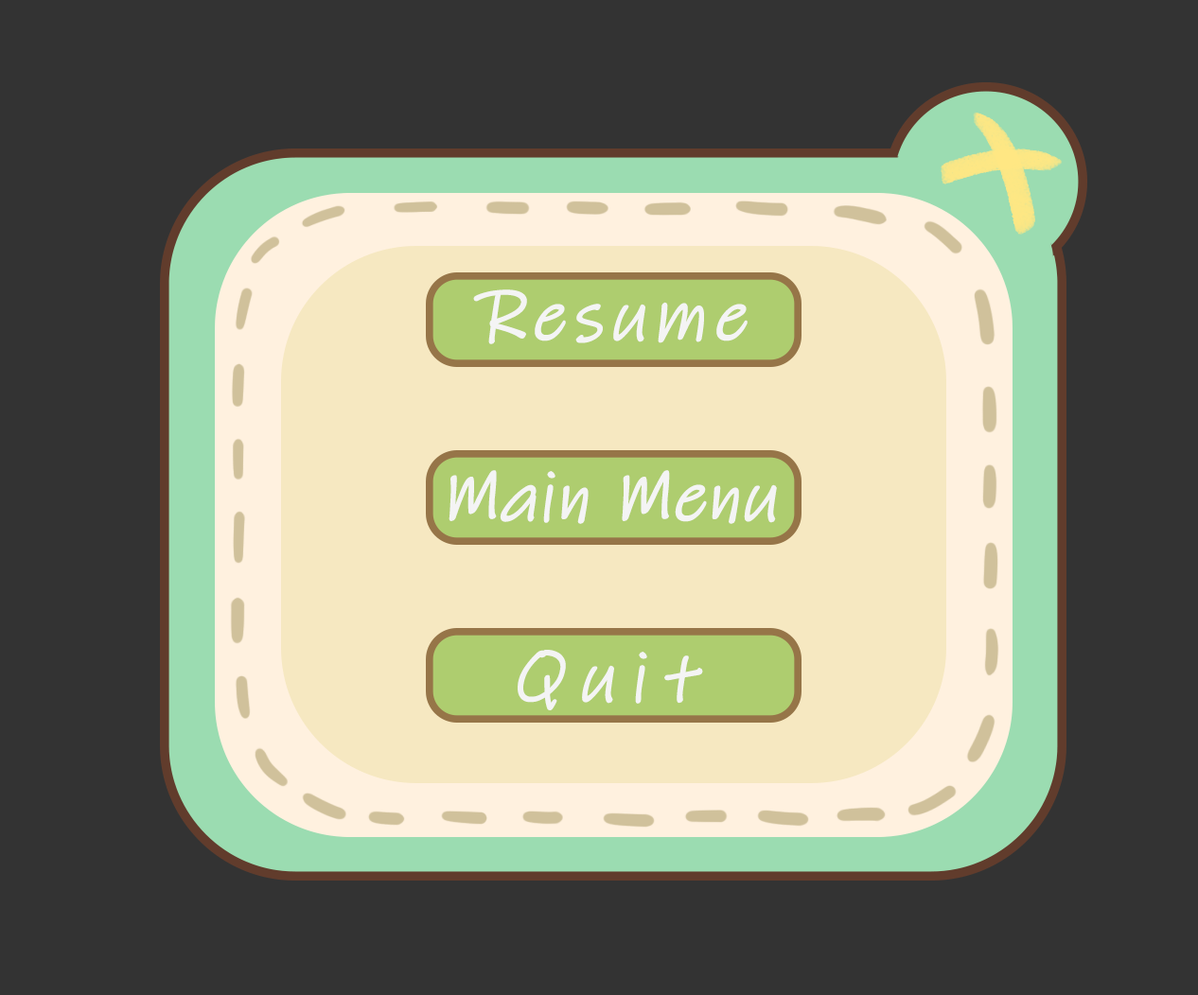
<style>
.page{position:relative;width:1198px;height:995px;background:#333333}
.page>*{position:absolute;margin:0}
.t1{font:70.6px "InkFree";letter-spacing:0.075em;color:#f4f4f4;font-weight:bold;font-style:italic}
.t2{font:70.6px "InkFree";color:#f4f4f4;font-weight:bold;font-style:italic}
.t3{font:70.6px "InkFree";letter-spacing:0.2em;color:#f4f4f4;font-weight:bold;font-style:italic}
</style>
<div class="page">
<p class="t1" style="left:473px;top:290px;width:275px;height:54px">Resume</p>
<p class="t2" style="left:449px;top:470px;width:328px;height:54px">Main Menu</p>
<p class="t3" style="left:518px;top:650px;width:185px;height:61px">Quit</p>
</div>
